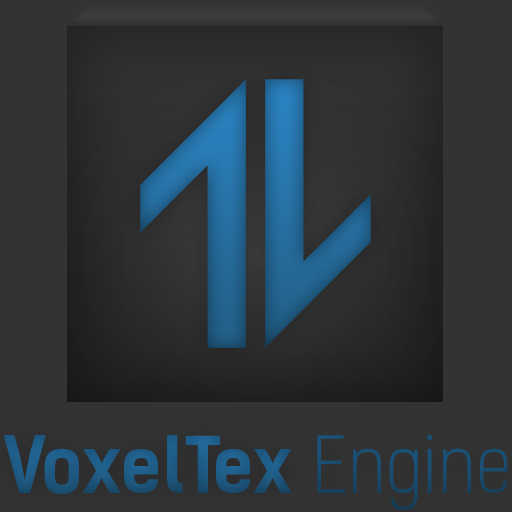
<style>
.page{position:relative;width:512px;height:512px;background:#333333}
.page>*{position:absolute;margin:0}
.t1{font:75px "KelsonSans-Bold";color:#1e5880}
.t2{font:75px "KelsonSans-Light";color:#1e5880}
</style>
<div class="page">
<p class="t1" style="left:3px;top:435px;width:505px;height:75px">VoxelTex<span class="t2"> Engine</span></p>
</div>
